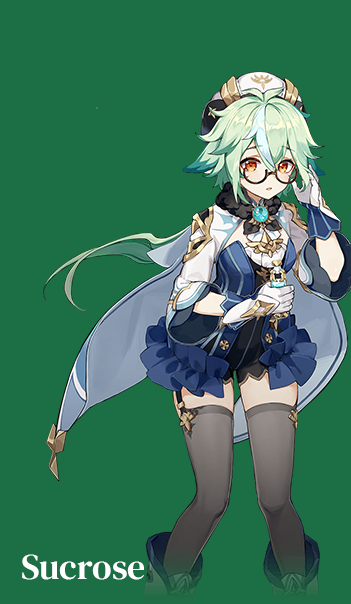
<style>
.page{position:relative;width:351px;height:604px;background:#1c6e45}
.page>*{position:absolute;margin:0}
.t1{font:36px "DMSerifText-Regular";color:#ffffff}
</style>
<div class="page">
<p class="t1" style="left:22px;top:554px;width:122px;height:26px">Sucrose</p>
</div>
